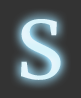
<style>
.page{position:relative;width:81px;height:98px;background:#333333}
.page>*{position:absolute;margin:0}
.t1{font:80px "Merriweather-Regular";color:#ddf4fa}
</style>
<div class="page">
<p class="t1" style="left:21px;top:19px;width:40px;height:61px">S</p>
</div>
